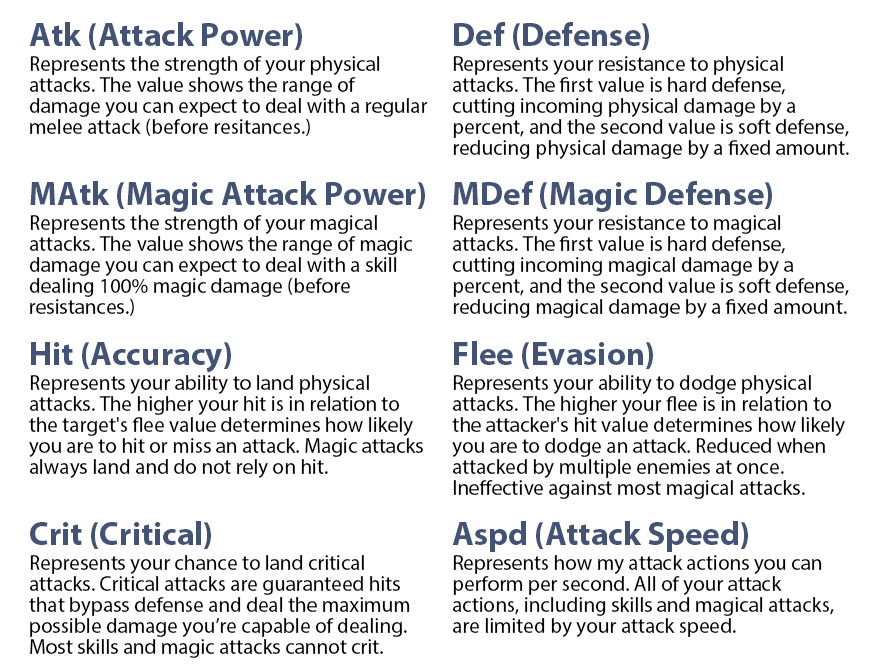
<style>
.page{position:relative;width:888px;height:668px;background:#ffffff}
.page>*{position:absolute;margin:0}
.t1{font:33px "MyriadPro-Bold";color:#425375}
.t2{font:21px/21px "MyriadPro-Regular";color:#000000}
</style>
<div class="page">
<p class="t1" style="left:29px;top:22px;width:273px;height:28px">Atk (Attack Power)</p>
<p class="t1" style="left:454px;top:22px;width:195px;height:28px">Def (Defense)</p>
<p class="t2" style="left:29px;top:56px;width:399px;height:80px">Represents the strength of your physical attacks. The value shows the range of damage you can expect to deal with a regular melee attack (before resitances.)</p>
<p class="t2" style="left:452px;top:56px;width:397px;height:103px">Represents your resistance to physical attacks. The first value is hard defense, cutting incoming physical damage by a percent, and the second value is soft defense, reducing physical damage by a fixed amount.</p>
<p class="t1" style="left:30px;top:181px;width:395px;height:31px">MAtk (Magic Attack Power)</p>
<p class="t1" style="left:453px;top:181px;width:319px;height:31px">MDef (Magic Defense)</p>
<p class="t2" style="left:29px;top:215px;width:384px;height:101px">Represents the strength of your magical attacks. The value shows the range of magic damage you can expect to deal with a skill dealing 100% magic damage (before resistances.)</p>
<p class="t2" style="left:452px;top:215px;width:397px;height:103px">Represents your resistance to magical attacks. The first value is hard defense, cutting incoming magical damage by a percent, and the second value is soft defense, reducing magical damage by a fixed amount.</p>
<p class="t1" style="left:31px;top:342px;width:200px;height:31px">Hit (Accuracy)</p>
<p class="t1" style="left:454px;top:341px;width:199px;height:28px">Flee (Evasion)</p>
<p class="t2" style="left:29px;top:375px;width:394px;height:103px">Represents your ability to land physical attacks. The higher your hit is in relation to the target's flee value determines how likely you are to hit or miss an attack. Magic attacks always land and do not rely on hit.</p>
<p class="t2" style="left:452px;top:375px;width:393px;height:124px">Represents your ability to dodge physical attacks. The higher your flee is in relation to the attacker's hit value determines how likely you are to dodge an attack. Reduced when attacked by multiple enemies at once. <br>Ineffective against most magical attacks.</p>
<p class="t1" style="left:30px;top:521px;width:181px;height:28px">Crit (Critical)</p>
<p class="t1" style="left:452px;top:521px;width:296px;height:31px">Aspd (Attack Speed)</p>
<p class="t2" style="left:29px;top:555px;width:381px;height:103px">Represents your chance to land critical attacks. Critical attacks are guaranteed hits that bypass defense and deal the maximum possible damage you’re capable of dealing. Most skills and magic attacks cannot crit.</p>
<p class="t2" style="left:452px;top:555px;width:382px;height:82px">Represents how my attack actions you can perform per second. All of your attack actions, including skills and magical attacks, are limited by your attack speed.</p>
</div>
